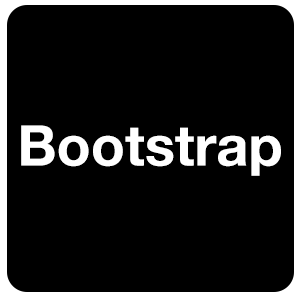
<style>
.page{position:relative;width:300px;height:296px;background:#000000}
.page>*{position:absolute;margin:0}
.t1{font:56px "HelveticaNeue-Bold";color:#ffffff}
</style>
<div class="page">
<p class="t1" style="left:21px;top:125px;width:260px;height:51px">Bootstrap</p>
</div>
